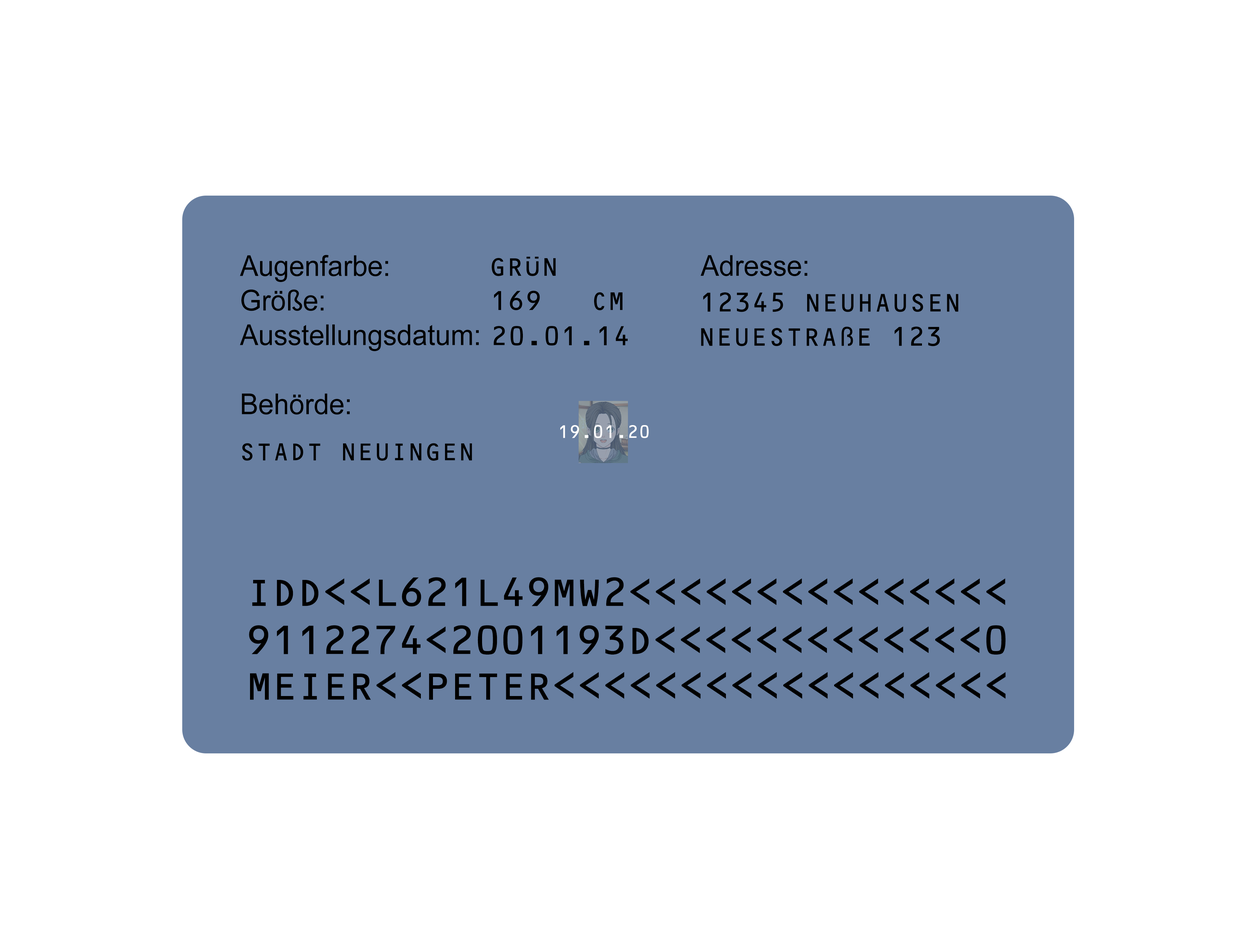
<style>
.page{position:relative;width:1256px;height:949px;background:#ffffff}
.page>*{position:absolute;margin:0}
.t1{font:30.3px "OCRB10PitchBT-Regular";color:#000000;text-transform:uppercase;scale:0.96 1}
.t2{font:20.1px "OCRB10PitchBT-Regular";color:#ffffff;scale:0.96 1}
.t3{font:29.2px "OCRB10PitchBT-Regular";color:#000000;scale:0.96 1}
.t4{font:45.2px "OCRB10PitchBT-Regular";letter-spacing:-0.04em;color:#000000}
</style>
<div class="page">
<p class="t1" style="left:492px;top:257px;width:64px;height:19px">GRÜN</p>
<p class="t1" style="left:494px;top:291px;width:46px;height:20px">169</p>
<p class="t1" style="left:703px;top:293px;width:255px;height:19px">12345 Neuhausen</p>
<p class="t1" style="left:493px;top:326px;width:135px;height:20px">20.01.14</p>
<p class="t1" style="left:701px;top:327px;width:239px;height:19px">Neuestraße 123</p>
<p class="t2" style="left:560px;top:425px;width:89px;height:13px">19.01.20</p>
<p class="t3" style="left:242px;top:443px;width:230px;height:18px">STADT NEUINGEN</p>
<p class="t4" style="left:252px;top:577px;width:753px;height:30px">IDD&lt;&lt;L621L49MW2&lt;&lt;&lt;&lt;&lt;&lt;&lt;&lt;&lt;&lt;&lt;&lt;&lt;&lt;&lt;</p>
<p class="t4" style="left:249px;top:626px;width:757px;height:29px">9112274&lt;2001193D&lt;&lt;&lt;&lt;&lt;&lt;&lt;&lt;&lt;&lt;&lt;&lt;&lt;0</p>
<p class="t4" style="left:250px;top:672px;width:756px;height:28px">MEIER&lt;&lt;PETER&lt;&lt;&lt;&lt;&lt;&lt;&lt;&lt;&lt;&lt;&lt;&lt;&lt;&lt;&lt;&lt;&lt;&lt;</p>
</div>
